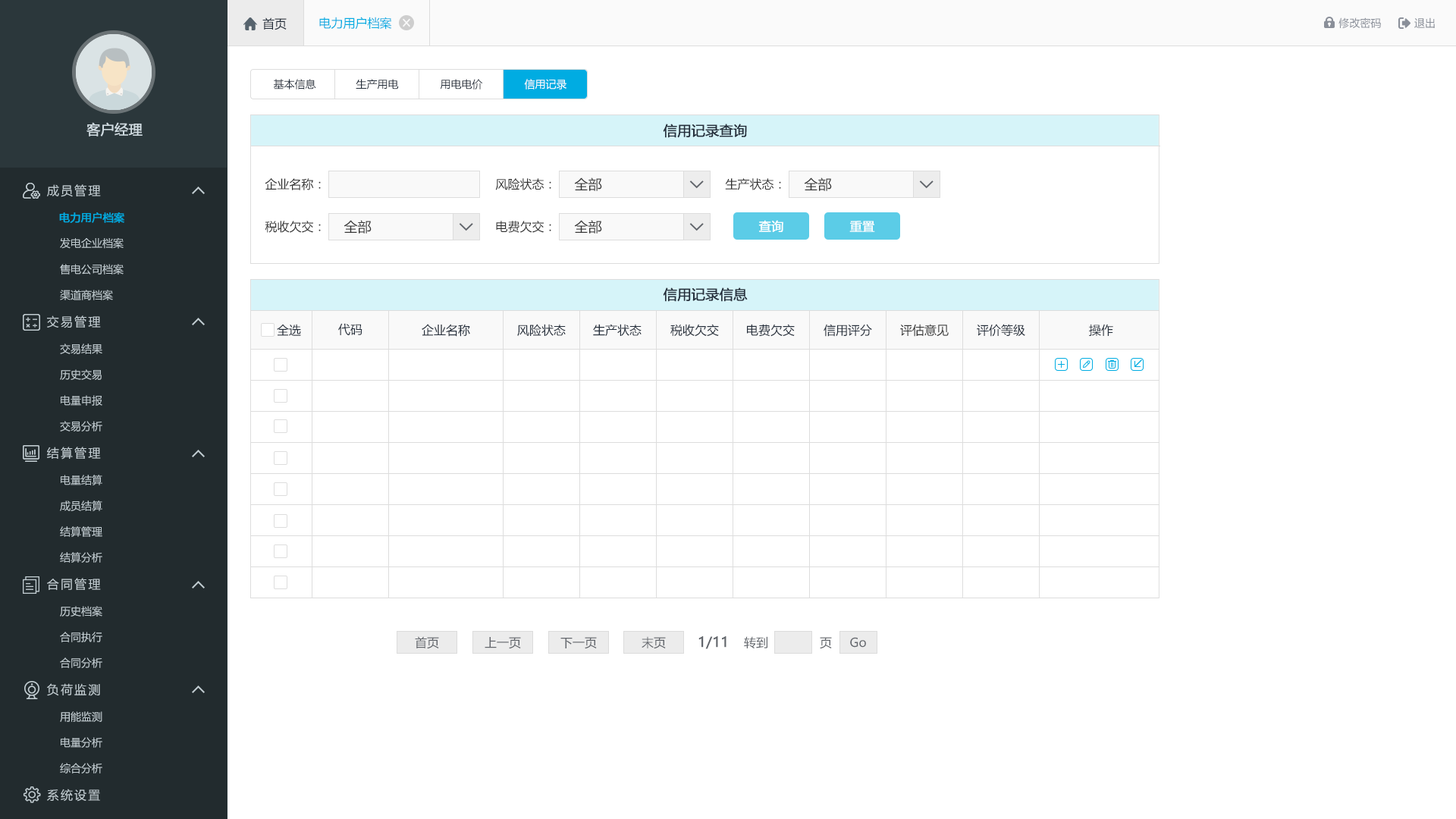
<style>
.page{position:relative;width:1456px;height:819px;background:#ffffff}
.page>*{position:absolute;margin:0}
.t1{font:12.1px "MicrosoftYaHei";color:#242e3b}
.t2{font:12.1px "MicrosoftYaHei";color:#00ace2}
.t3{font:10.6px "MicrosoftYaHei";color:#8a8f99}
.t4{font:10.6px "MicrosoftYaHei";color:#242e3b}
.t5{font:10.6px "MicrosoftYaHei";color:#ffffff}
.t6{font:13.6px "MicrosoftYaHei";color:#d1dce2;font-weight:bold}
.t7{font:13.6px "MicrosoftYaHei";color:#242e3b;font-weight:bold}
.t8{font:12.1px "MicrosoftYaHei";letter-spacing:0.14em;color:#c2cdd2}
.t9{font:12.1px "MicrosoftYaHei";color:#333333}
.t10{font:13.6px "MicrosoftYaHei";color:#333333}
.t11{font:10.6px "MicrosoftYaHei";color:#00ace2;font-weight:bold}
.t12{font:12.1px "MicrosoftYaHei";color:#ffffff;font-weight:bold}
.t13{font:10.6px "MicrosoftYaHei";color:#c2cdd2}
.t14{font:12.1px "MicrosoftYaHei";color:#61656b}
.t15{font:13.6px "MicrosoftYaHei";color:#61656b;font-weight:bold}
</style>
<div class="page">
<p class="t1" style="left:262px;top:17px;width:25px;height:13px">首页</p>
<p class="t2" style="left:319px;top:17px;width:73px;height:13px">电力用户档案</p>
<p class="t3" style="left:1338px;top:17px;width:43px;height:12px">修改密码</p>
<p class="t3" style="left:1414px;top:17px;width:21px;height:11px">退出</p>
<p class="t4" style="left:273px;top:79px;width:43px;height:10px">基本信息</p>
<p class="t4" style="left:356px;top:79px;width:43px;height:10px">生产用电</p>
<p class="t4" style="left:440px;top:79px;width:43px;height:10px">用电电价</p>
<p class="t5" style="left:524px;top:79px;width:42px;height:10px">信用记录</p>
<p class="t6" style="left:86px;top:122px;width:57px;height:14px">客户经理</p>
<p class="t7" style="left:663px;top:124px;width:84px;height:14px">信用记录查询</p>
<p class="t8" style="left:47px;top:184px;width:54px;height:13px">成员管理</p>
<p class="t9" style="left:265px;top:178px;width:56px;height:12px">企业名称：</p>
<p class="t9" style="left:495px;top:178px;width:56px;height:12px">风险状态：</p>
<p class="t10" style="left:574px;top:177px;width:28px;height:14px">全部</p>
<p class="t9" style="left:725px;top:178px;width:56px;height:12px">生产状态：</p>
<p class="t10" style="left:804px;top:177px;width:28px;height:14px">全部</p>
<p class="t11" style="left:59px;top:212px;width:65px;height:11px">电力用户档案</p>
<p class="t9" style="left:265px;top:221px;width:56px;height:12px">税收欠交：</p>
<p class="t10" style="left:344px;top:220px;width:28px;height:14px">全部</p>
<p class="t9" style="left:496px;top:221px;width:55px;height:12px">电费欠交：</p>
<p class="t10" style="left:574px;top:220px;width:28px;height:14px">全部</p>
<p class="t12" style="left:758px;top:220px;width:25px;height:12px">查询</p>
<p class="t12" style="left:849px;top:221px;width:26px;height:11px">重置</p>
<p class="t13" style="left:60px;top:237px;width:64px;height:12px">发电企业档案</p>
<p class="t13" style="left:60px;top:264px;width:64px;height:11px">售电公司档案</p>
<p class="t13" style="left:60px;top:290px;width:53px;height:10px">渠道商档案</p>
<p class="t7" style="left:663px;top:287px;width:85px;height:15px">信用记录信息</p>
<p class="t8" style="left:47px;top:315px;width:54px;height:13px">交易管理</p>
<p class="t1" style="left:277px;top:324px;width:24px;height:12px">全选</p>
<p class="t1" style="left:338px;top:323px;width:24px;height:12px">代码</p>
<p class="t1" style="left:422px;top:324px;width:48px;height:13px">企业名称</p>
<p class="t1" style="left:517px;top:324px;width:49px;height:13px">风险状态</p>
<p class="t1" style="left:593px;top:324px;width:49px;height:12px">生产状态</p>
<p class="t1" style="left:670px;top:324px;width:49px;height:13px">税收欠交</p>
<p class="t1" style="left:747px;top:324px;width:48px;height:13px">电费欠交</p>
<p class="t1" style="left:824px;top:324px;width:48px;height:13px">信用评分</p>
<p class="t9" style="left:900px;top:324px;width:49px;height:13px">评估意见</p>
<p class="t1" style="left:977px;top:324px;width:48px;height:13px">评价等级</p>
<p class="t1" style="left:1089px;top:324px;width:24px;height:12px">操作</p>
<p class="t13" style="left:60px;top:344px;width:42px;height:10px">交易结果</p>
<p class="t13" style="left:60px;top:369px;width:42px;height:11px">历史交易</p>
<p class="t13" style="left:61px;top:395px;width:41px;height:11px">电量申报</p>
<p class="t13" style="left:60px;top:421px;width:42px;height:10px">交易分析</p>
<p class="t8" style="left:47px;top:447px;width:54px;height:13px">结算管理</p>
<p class="t13" style="left:61px;top:475px;width:41px;height:10px">电量结算</p>
<p class="t13" style="left:60px;top:500px;width:42px;height:11px">成员结算</p>
<p class="t13" style="left:60px;top:526px;width:42px;height:11px">结算管理</p>
<p class="t13" style="left:60px;top:552px;width:42px;height:11px">结算分析</p>
<p class="t8" style="left:47px;top:578px;width:54px;height:12px">合同管理</p>
<p class="t13" style="left:60px;top:606px;width:42px;height:11px">历史档案</p>
<p class="t13" style="left:60px;top:632px;width:42px;height:10px">合同执行</p>
<p class="t14" style="left:415px;top:636px;width:24px;height:13px">首页</p>
<p class="t14" style="left:485px;top:637px;width:36px;height:12px">上一页</p>
<p class="t14" style="left:560px;top:637px;width:37px;height:12px">下一页</p>
<p class="t14" style="left:642px;top:636px;width:24px;height:13px">末页</p>
<p class="t15" style="left:698px;top:636px;width:28px;height:13px">1/11</p>
<p class="t14" style="left:744px;top:636px;width:23px;height:12px">转到</p>
<p class="t14" style="left:820px;top:637px;width:12px;height:12px">页</p>
<p class="t14" style="left:850px;top:637px;width:16px;height:11px">Go</p>
<p class="t13" style="left:60px;top:657px;width:42px;height:11px">合同分析</p>
<p class="t8" style="left:47px;top:683px;width:53px;height:13px">负荷监测</p>
<p class="t13" style="left:60px;top:711px;width:42px;height:11px">用能监测</p>
<p class="t13" style="left:61px;top:737px;width:41px;height:11px">电量分析</p>
<p class="t13" style="left:60px;top:763px;width:42px;height:10px">综合分析</p>
<p class="t8" style="left:47px;top:789px;width:53px;height:13px">系统设置</p>
</div>
